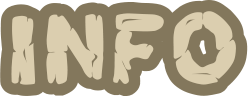
<style>
.page{position:relative;width:248px;height:96px;background:#83775c}
.page>*{position:absolute;margin:0}
.t1{font:144px "Chlorinar-Regular";color:#83775c}
</style>
<div class="page">
<p class="t1" style="left:0px;top:0px;width:248px;height:96px">info</p>
</div>
